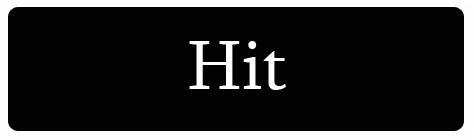
<style>
.page{position:relative;width:474px;height:140px;background:#030202}
.page>*{position:absolute;margin:0}
.t1{font:72px "Sylfaen";color:#ffffff}
</style>
<div class="page">
<p class="t1" style="left:189px;top:41px;width:97px;height:49px">Hit</p>
</div>
